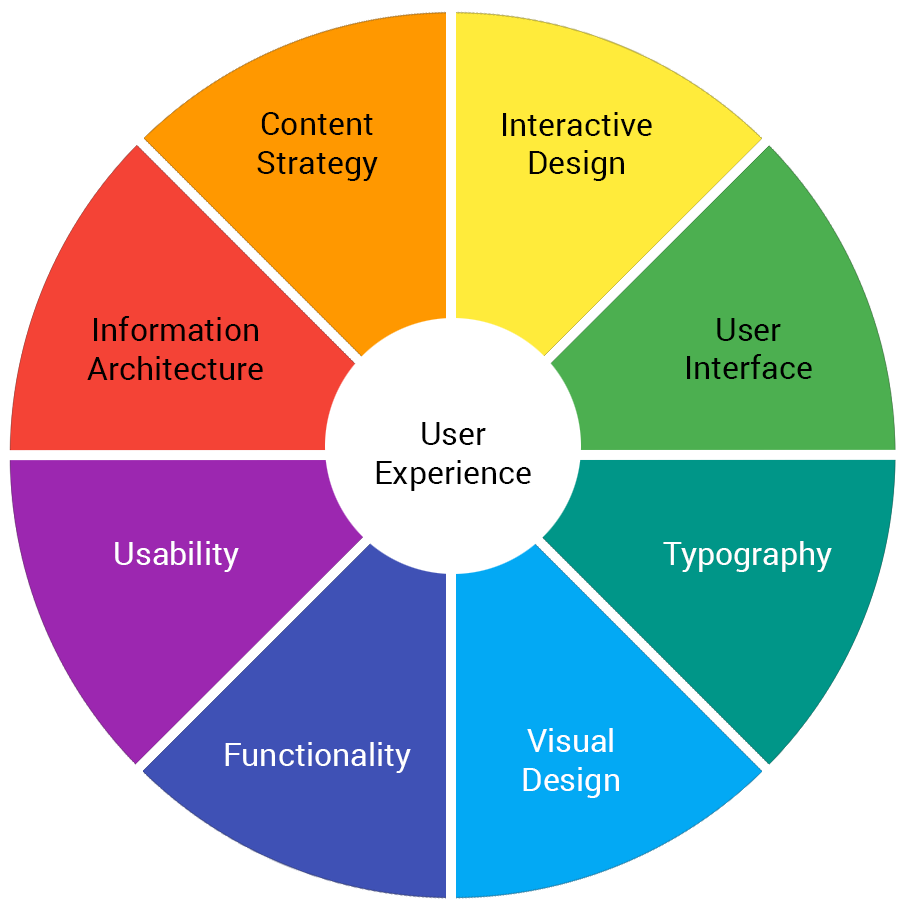
<style>
.page{position:relative;width:907px;height:910px;background:#ffffff}
.page>*{position:absolute;margin:0}
.t1{font:32.1px "Roboto-Regular";color:#000000}
.t2{font:32.1px "Roboto-Regular";color:#ffffff}
</style>
<div class="page">
<p class="t1" style="left:257px;top:112px;width:121px;height:69px;text-align:center">Content<br>Strategy</p>
<p class="t1" style="left:503px;top:112px;width:149px;height:69px;text-align:center">Interactive Design</p>
<p class="t1" style="left:87px;top:316px;width:176px;height:64px;text-align:center">Information<br>Architecture</p>
<p class="t1" style="left:687px;top:318px;width:125px;height:61px;text-align:center">User <br>Interface</p>
<p class="t1" style="left:376px;top:422px;width:155px;height:69px;text-align:center">User <br>Experience</p>
<p class="t2" style="left:115px;top:541px;width:124px;height:31px">Usability</p>
<p class="t2" style="left:663px;top:541px;width:169px;height:31px">Typography</p>
<p class="t2" style="left:523px;top:728px;width:96px;height:70px;text-align:center">Visual<br>Design</p>
<p class="t2" style="left:225px;top:742px;width:186px;height:31px">Functionality</p>
</div>
